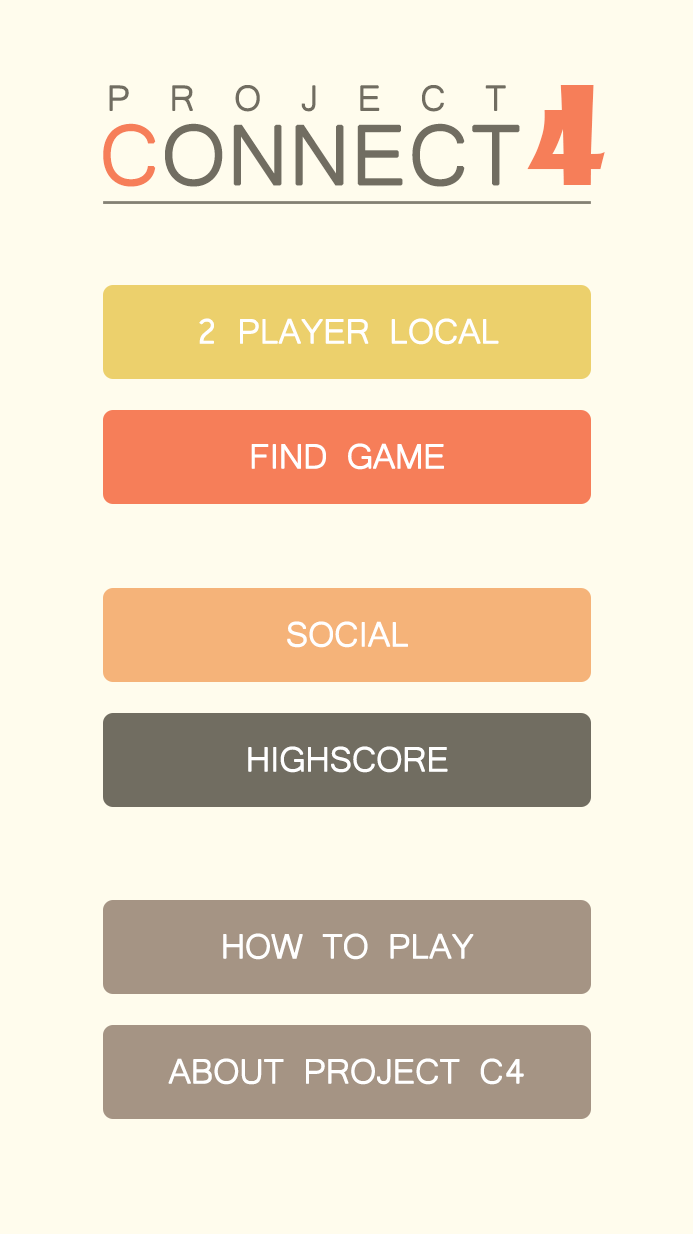
<style>
.page{position:relative;width:693px;height:1234px;background:#fffced}
.page>*{position:absolute;margin:0}
.t1{font:45.2px "Microsoft-Yi-Baiti";letter-spacing:0.855em;color:#716d61;text-transform:uppercase;font-weight:bold}
.t2{font:132.8px "ShowcardGothic-Reg";color:#f67e59;text-transform:uppercase}
.t3{font:107.5px "Microsoft-Yi-Baiti";color:#716d61;text-transform:uppercase;font-weight:bold}
.t4{font:107.5px "Microsoft-Yi-Baiti";color:#f67e59;text-transform:uppercase;font-weight:bold}
.t5{font:44px "Microsoft-Yi-Baiti";letter-spacing:-0.025em;color:#ffffff;text-transform:uppercase;font-weight:bold}
</style>
<div class="page">
<p class="t1" style="left:109px;top:85px;width:397px;height:27px">project</p>
<p class="t2" style="left:527px;top:85px;width:78px;height:100px">4</p>
<p class="t3" style="left:103px;top:123px;width:417px;height:64px"><span class="t4">c</span>onnect</p>
<p class="t5" style="left:199px;top:318px;width:300px;height:27px">2 Player Local</p>
<p class="t5" style="left:251px;top:443px;width:193px;height:27px">find game</p>
<p class="t5" style="left:287px;top:621px;width:121px;height:27px">Social</p>
<p class="t5" style="left:248px;top:746px;width:200px;height:27px">Highscore</p>
<p class="t5" style="left:223px;top:933px;width:251px;height:27px">How to play</p>
<p class="t5" style="left:168px;top:1058px;width:356px;height:27px">About Project C4</p>
</div>
